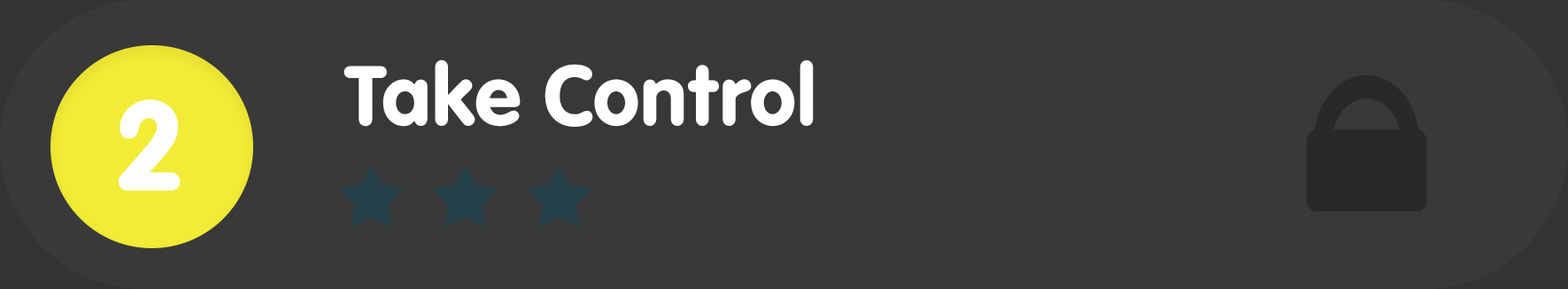
<style>
.page{position:relative;width:1568px;height:289px;background:#393939}
.page>*{position:absolute;margin:0}
.t1{font:88.5px "VAGRundschriftD";color:#ffffff}
.t2{font:132.8px "VAGRundschriftD";color:#ffffff}
</style>
<div class="page">
<p class="t1" style="left:344px;top:59px;width:470px;height:68px">Take Control</p>
<p class="t2" style="left:118px;top:99px;width:63px;height:91px">2</p>
</div>
